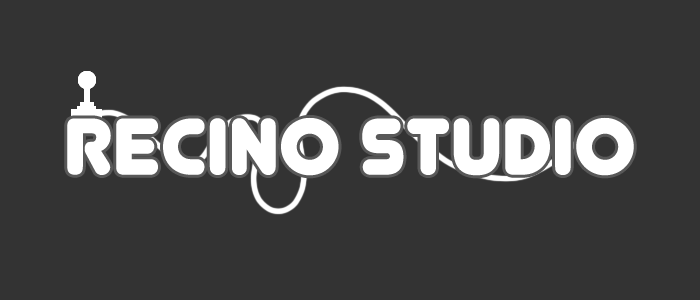
<style>
.page{position:relative;width:700px;height:300px;background:#333333}
.page>*{position:absolute;margin:0}
.t1{font:80px "Junegull-Regular";color:#ffffff}
</style>
<div class="page">
<p class="t1" style="left:67px;top:117px;width:567px;height:59px">RECINO STUDIO</p>
</div>
